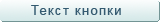
<style>
.page{position:relative;width:160px;height:22px}
.page>*{position:absolute;margin:0}
.t1{font:13px "ArialMT";letter-spacing:0.099em;color:#345a70}
</style>
<div class="page">
<p class="t1" style="left:31px;top:5px;width:90px;height:10px">Текст кнопки</p>
</div>
